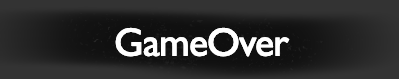
<style>
.page{position:relative;width:399px;height:79px}
.page>*{position:absolute;margin:0}
.t1{font:40px "GillSans";letter-spacing:-0.025em;color:#ffffff}
</style>
<div class="page">
<p class="t1" style="left:115px;top:27px;width:175px;height:30px">GameOver</p>
</div>
